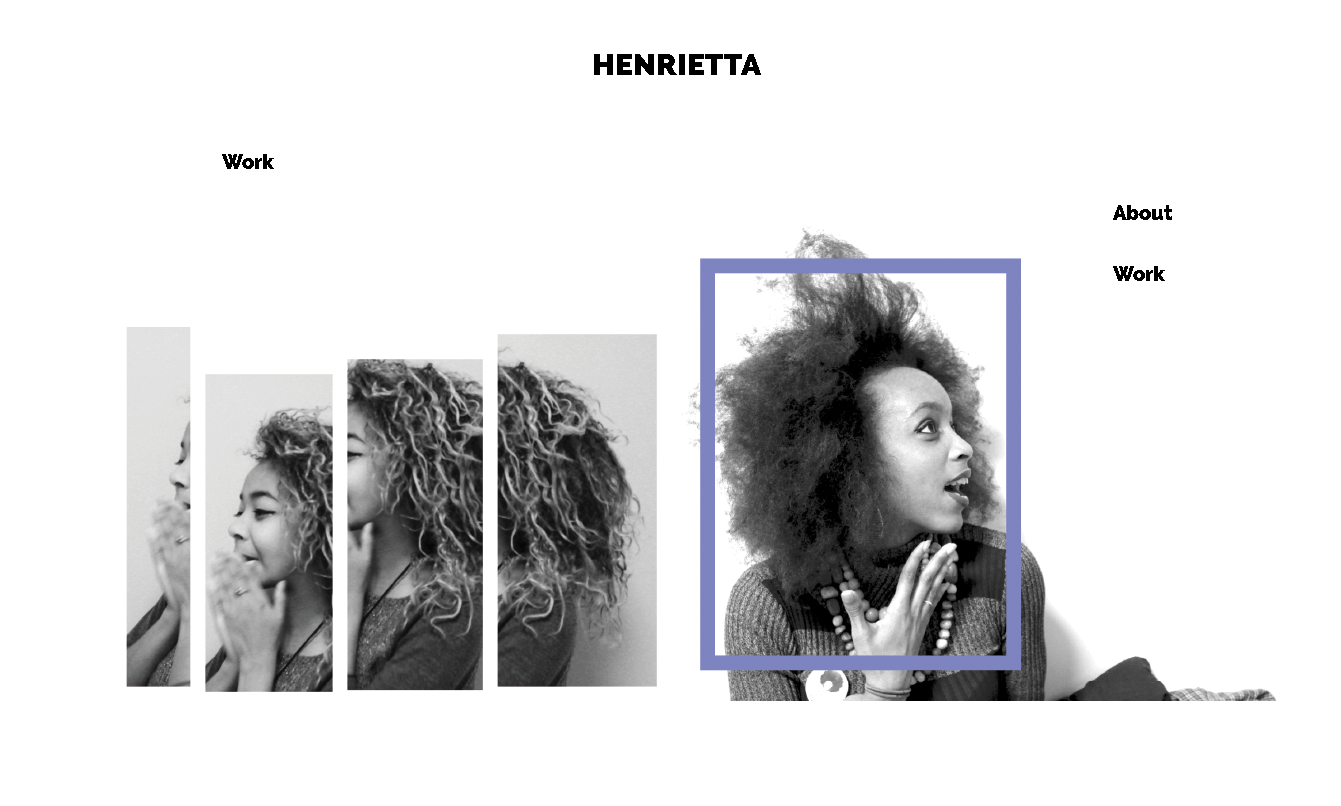
<style>
.page{position:relative;width:1341px;height:806px;background:#ffffff}
.page>*{position:absolute;margin:0}
.t1{font:30px "Raleway-Heavy";color:#000000}
.t2{font:20px "Raleway-Heavy";color:#000000}
</style>
<div class="page">
<p class="t1" style="left:594px;top:54px;width:167px;height:21px">HENRIETTA</p>
<p class="t2" style="left:222px;top:154px;width:52px;height:15px">Work</p>
<p class="t2" style="left:1113px;top:205px;width:59px;height:15px">About</p>
<p class="t2" style="left:1113px;top:266px;width:52px;height:15px">Work</p>
</div>
